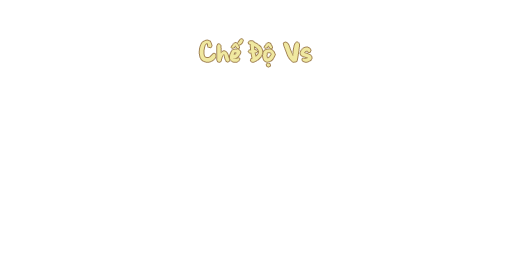
<style>
.page{position:relative;width:512px;height:256px;background:#ffffff}
.page>*{position:absolute;margin:0}
.t1{font:29.3px "BrianneTod";color:#f0e8a0}
</style>
<div class="page">
<p class="t1" style="left:199px;top:39px;width:113px;height:28px">Chế Độ Vs</p>
</div>
